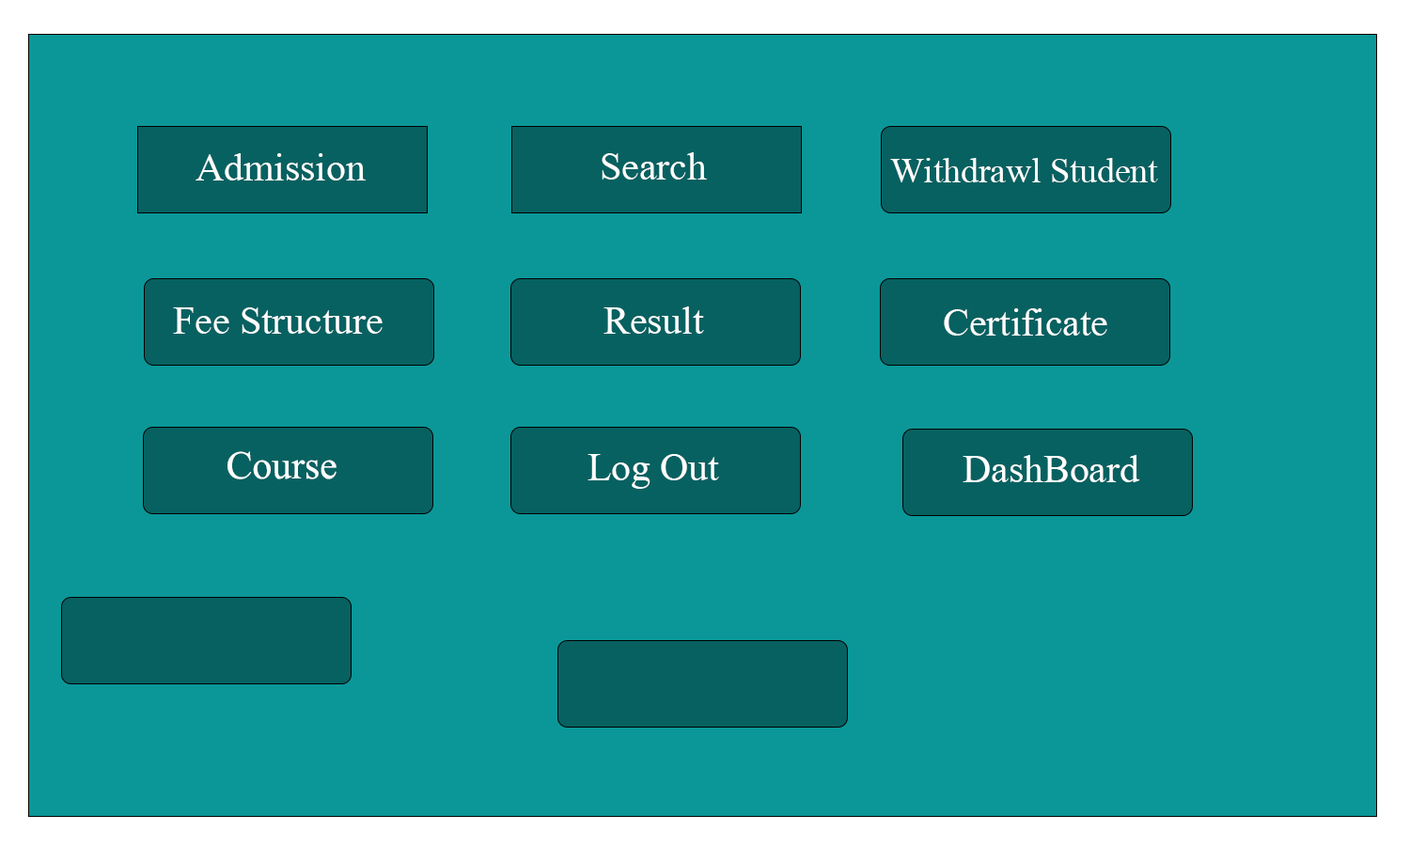
<style>
.page{position:relative;width:1410px;height:846px;background:#0b9798}
.page>*{position:absolute;margin:0}
.t1{font:39.2px "MongolianBaiti";color:#ffffff}
.t2{font:35.2px "MongolianBaiti";color:#ffffff}
</style>
<div class="page">
<p class="t1" style="left:195px;top:153px;width:171px;height:27px">Admission</p>
<p class="t1" style="left:601px;top:152px;width:106px;height:28px">Search</p>
<p class="t2" style="left:890px;top:158px;width:268px;height:24px">Withdrawl Student</p>
<p class="t1" style="left:173px;top:307px;width:210px;height:27px">Fee Structure</p>
<p class="t1" style="left:603px;top:306px;width:101px;height:28px">Result</p>
<p class="t1" style="left:944px;top:308px;width:163px;height:28px">Certificate</p>
<p class="t1" style="left:227px;top:451px;width:109px;height:28px">Course</p>
<p class="t1" style="left:587px;top:454px;width:132px;height:35px">Log Out</p>
<p class="t1" style="left:962px;top:455px;width:178px;height:27px">DashBoard</p>
</div>
